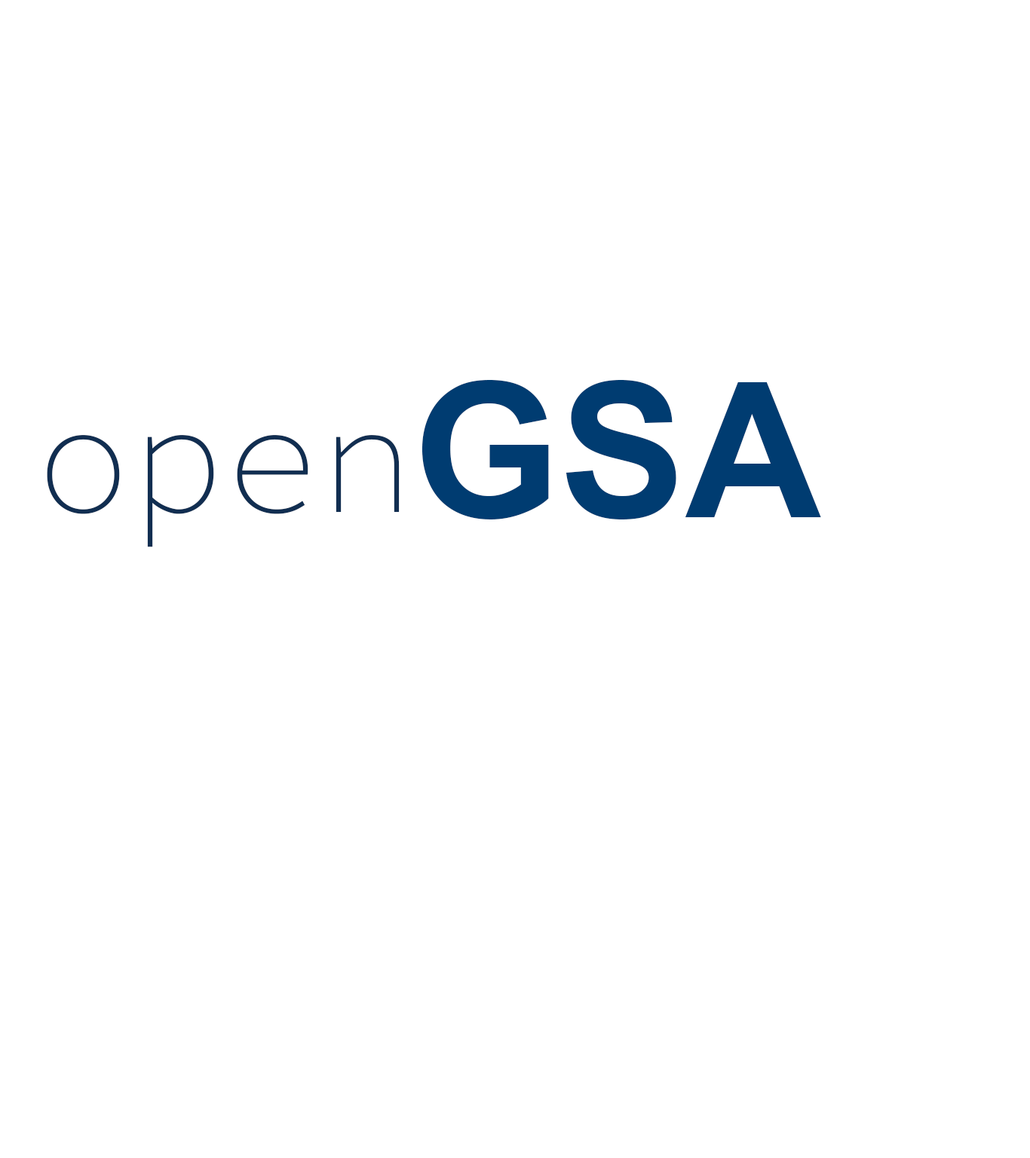
<style>
.page{position:relative;width:1030px;height:1158px;background:#ffffff}
.page>*{position:absolute;margin:0}
.t1{font:188.5px "Arial-BoldMT";color:#003c71}
.t2{font:157.1px "SourceCodePro-ExtraLight";color:#112e51}
</style>
<div class="page">
<p class="t1" style="left:421px;top:380px;width:400px;height:139px">GSA</p>
<p class="t2" style="left:47px;top:435px;width:353px;height:112px">open</p>
</div>
